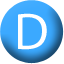
<style>
.page{position:relative;width:64px;height:64px;background:#ffffff}
.page>*{position:absolute;margin:0}
.t1{font:52px "MyriadPro-Regular";letter-spacing:0.11em;color:#ffffff}
</style>
<div class="page">
<p class="t1" style="left:18px;top:13px;width:29px;height:37px">D</p>
</div>
